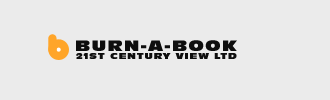
<style>
.page{position:relative;width:330px;height:100px;background:#ebebeb}
.page>*{position:absolute;margin:0}
.t1{font:14px "Incised901BT-Nord";letter-spacing:0.115em;color:#0e0e0e;text-transform:uppercase}
.t2{font:8px "Incised901BT-Nord";letter-spacing:0.115em;color:#0e0e0e;text-transform:uppercase}
</style>
<div class="page">
<p class="t1" style="left:76px;top:40px;width:161px;height:11px">burn-a-book</p>
<p class="t2" style="left:76px;top:53px;width:161px;height:6px">21st Century View Ltd</p>
</div>
